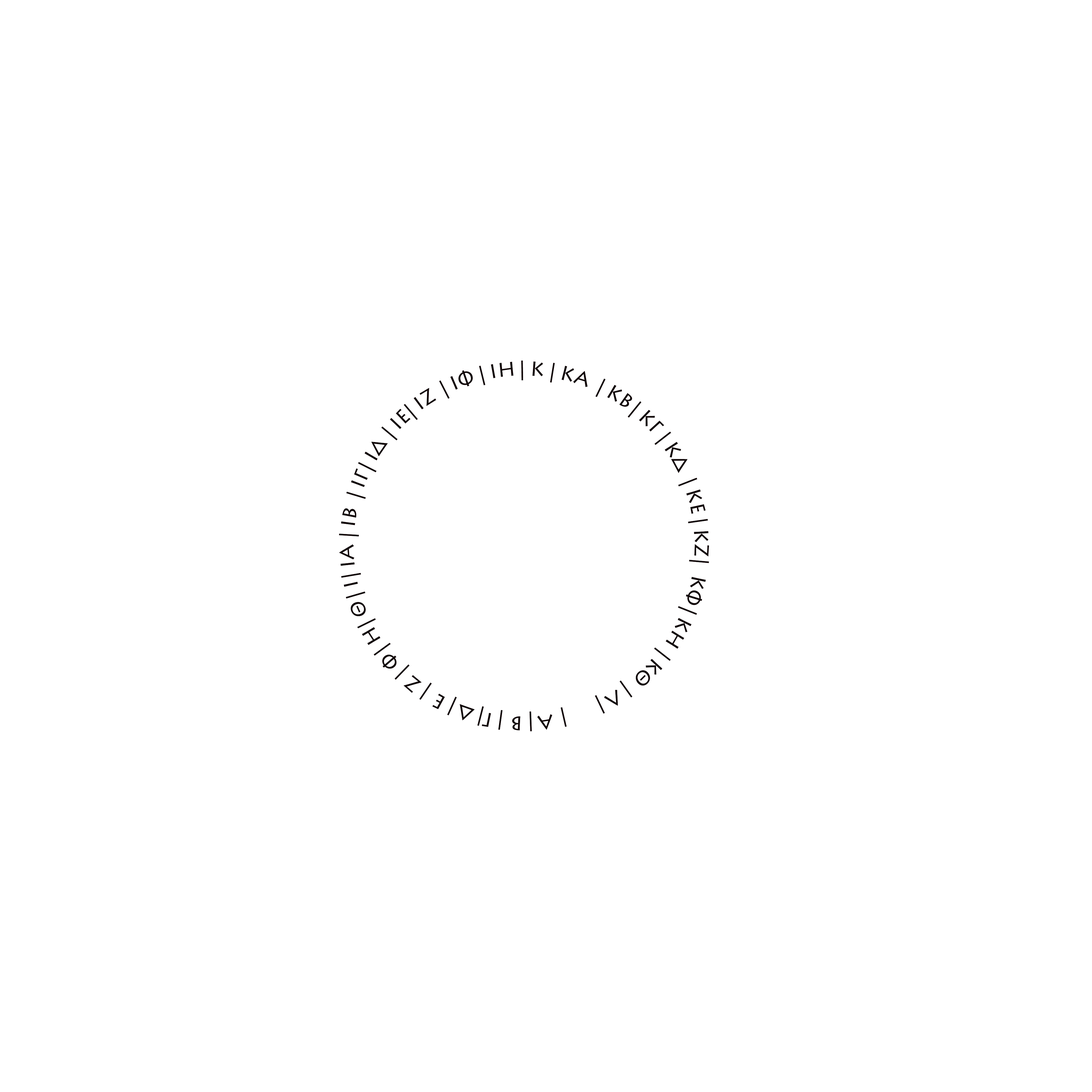
<style>
.page{position:relative;width:1092px;height:1092px;background:#ffffff}
.page>*{position:absolute;margin:0}
.t1{font:19.7px "LithosPro-Regular";color:#110708}
</style>
<div class="page">
<p class="t1" style="left:339px;top:360px;width:370px;height:371px;text-align:center">Α | Β | Γ | Δ | Ε | Ζ | Φ | Η | Θ | Ι | ΙΑ | ΙΒ | ΙΓ | ΙΔ | ΙΕ | ΙΖ | ΙΦ | ΙΗ | Κ | ΚΑ | ΚΒ | ΚΓ | ΚΔ | ΚΕ | ΚΖ |  ΚΦ | ΚΗ | ΚΘ | Λ |   |</p>
</div>
